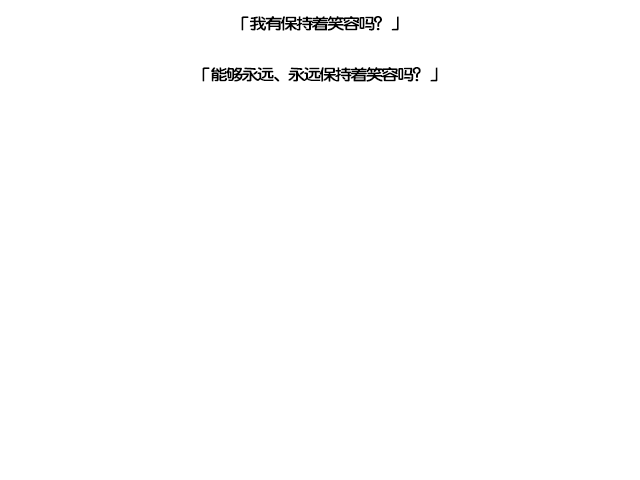
<style>
.page{position:relative;width:640px;height:480px;background:#ffffff}
.page>*{position:absolute;margin:0}
.t1{font:15.7px "FZY4K--GBK1-0";letter-spacing:-0.13em;color:#000000;scale:1.14 1}
</style>
<div class="page">
<p class="t1" style="left:241px;top:16px;width:158px;height:15px">「我有保持着笑容吗？」</p>
<p class="t1" style="left:202px;top:67px;width:236px;height:15px">「能够永远、永远保持着笑容吗？」</p>
</div>
